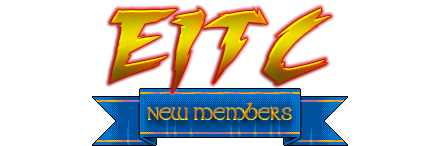
<style>
.page{position:relative;width:440px;height:146px;background:#ffffff}
.page>*{position:absolute;margin:0}
.t1{font:83px "FightingSpiritTBS";letter-spacing:-0.005em}
.t2{font:15px "Stonecross";letter-spacing:-0.005em}
</style>
<div class="page">
<p class="t1" style="left:109px;top:8px;width:222px;height:85px">EITC</p>
<p class="t2" style="left:146px;top:102px;width:146px;height:19px">NEW MEMBERS</p>
</div>
